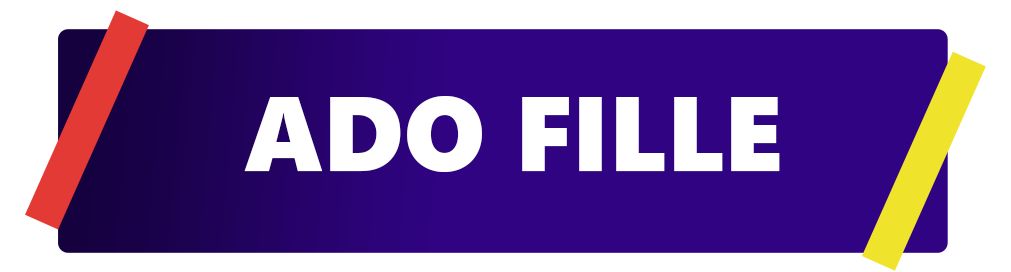
<style>
.page{position:relative;width:1011px;height:272px;background:#300383}
.page>*{position:absolute;margin:0}
.t1{font:106.3px "SegoeUIBlack";color:#ffffff;text-transform:uppercase}
</style>
<div class="page">
<p class="t1" style="left:244px;top:96px;width:536px;height:76px">ADO FILLE</p>
</div>
